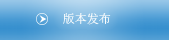
<style>
.page{position:relative;width:169px;height:40px}
.page>*{position:absolute;margin:0}
.t1{font:12px "SimSun";color:#fbfdfd}
</style>
<div class="page">
<p class="t1" style="left:63px;top:13px;width:48px;height:12px">版本发布</p>
</div>
